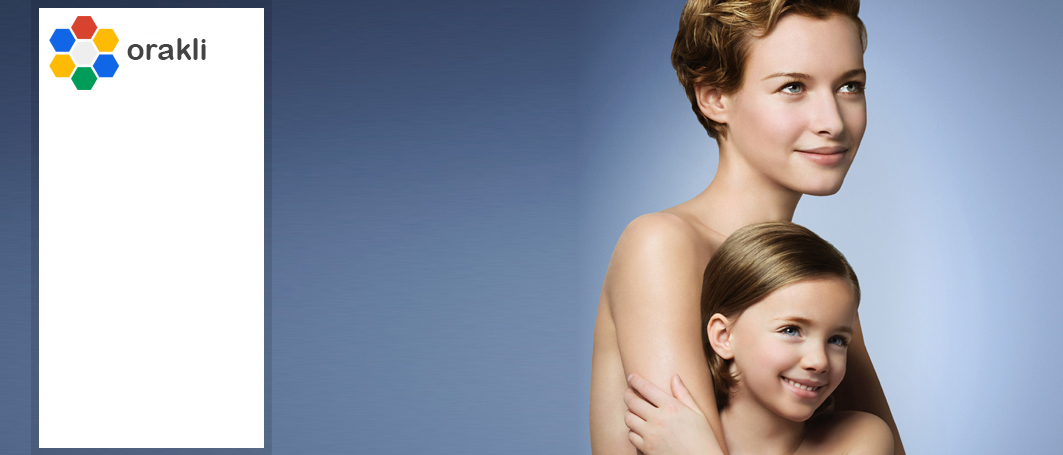
<style>
.page{position:relative;width:1063px;height:455px}
.page>*{position:absolute;margin:0}
.t1{font:30px "ArialRoundedMTBold";color:#444444}
</style>
<div class="page">
<p class="t1" style="left:127px;top:38px;width:79px;height:22px">orakli</p>
</div>
